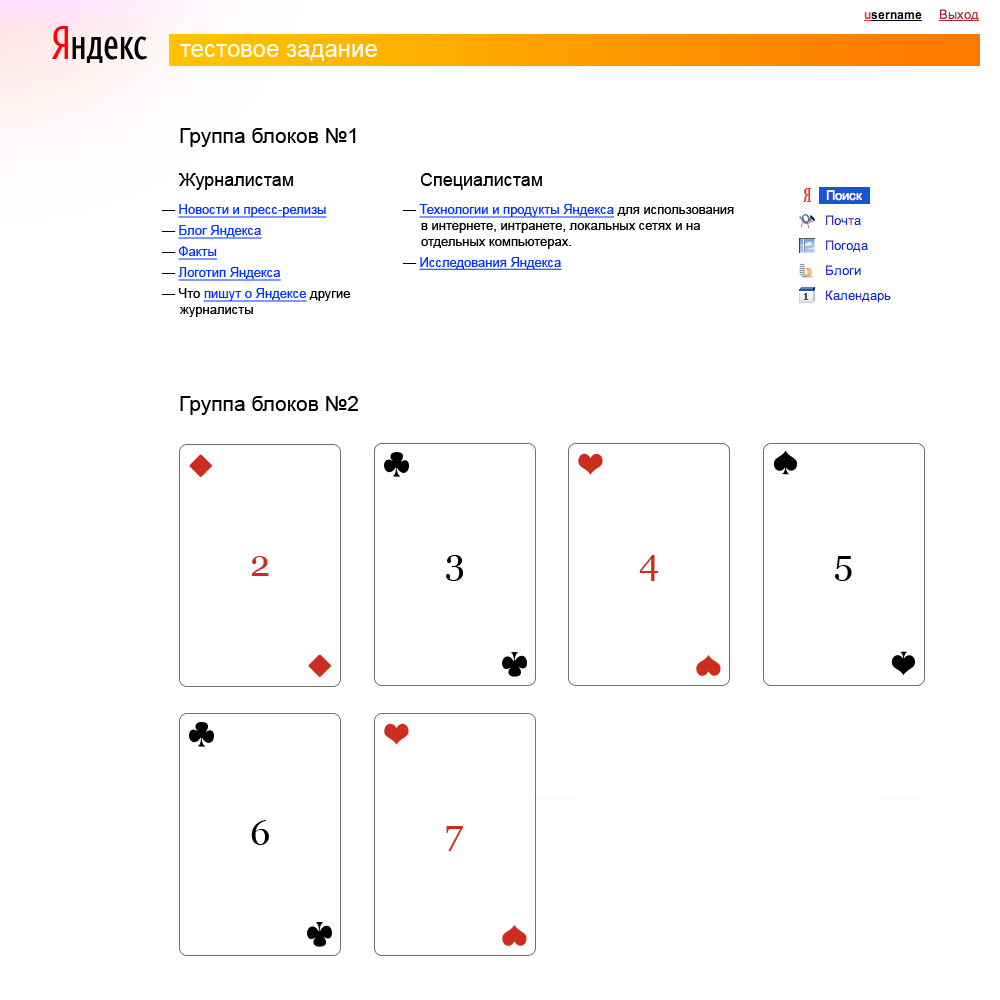
<style>
.page{position:relative;width:1000px;height:1000px;background:#ffffff}
.page>*{position:absolute;margin:0}
.t1{font:24px "ArialMT";color:#ffffff}
.t2{font:21px "ArialMT";color:#000000}
.t3{font:18px "ArialMT";color:#000000}
.t4{font:13px "ArialMT";color:#000000}
.t5{font:13px/21px "ArialMT";color:#000000}
.t6{font:13px/21px "ArialMT";color:#0033ff;text-decoration:underline}
.t7{font:13px "ArialMT";color:#0033ff;text-decoration:underline}
.t8{font:36px "Georgia";color:#cb2d1f}
.t9{font:36px "Georgia";color:#000000}
</style>
<div class="page">
<p class="t1" style="left:180px;top:44px;width:197px;height:17px">тестовое задание</p>
<p class="t2" style="left:180px;top:128px;width:176px;height:19px">Группа блоков №1</p>
<p class="t3" style="left:179px;top:173px;width:114px;height:17px">Журналистам</p>
<p class="t3" style="left:420px;top:173px;width:122px;height:17px">Специалистам</p>
<p class="t4" style="left:161px;top:204px;width:190px;height:113px"><span class="t5">— </span><span class="t6">Новости и пресс-релизы<br></span><span class="t5">— </span><span class="t6">Блог Яндекса<br></span><span class="t5">— </span><span class="t6">Факты<br></span><span class="t5">— </span><span class="t6">Логотип Яндекса<br></span><span class="t5">— Что </span><span class="t6">пишут </span><span class="t7">о Яндексе</span> другие   <br>     журналисты</p>
<p class="t4" style="left:402px;top:204px;width:332px;height:66px"><span class="t5">— </span><span class="t6">Технологии и пр</span><span class="t7">одукты Яндекса</span> для использования <br>     в интернете, интранете, локальных сетях и на  <br>     отдельных компьютерах.<br><span class="t5">— </span><span class="t6">Исследования Яндекса</span></p>
<p class="t2" style="left:180px;top:396px;width:178px;height:19px">Группа блоков №2</p>
<p class="t8" style="left:251px;top:556px;width:18px;height:20px">2</p>
<p class="t9" style="left:446px;top:555px;width:17px;height:26px">3</p>
<p class="t8" style="left:639px;top:555px;width:19px;height:26px">4</p>
<p class="t9" style="left:835px;top:556px;width:17px;height:25px">5</p>
<p class="t9" style="left:251px;top:820px;width:18px;height:25px">6</p>
<p class="t8" style="left:446px;top:826px;width:18px;height:25px">7</p>
</div>
